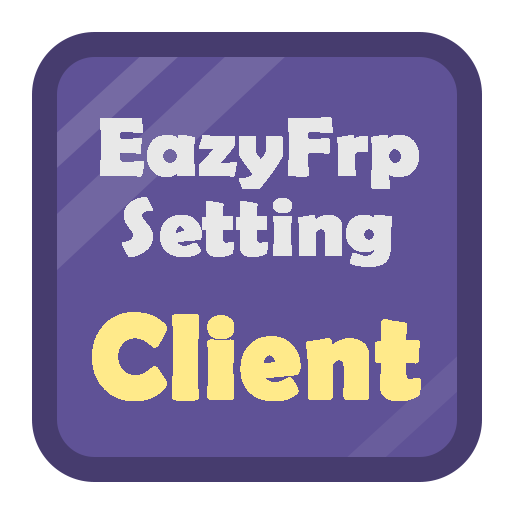
<style>
.page{position:relative;width:512px;height:512px;background:#5f5296}
.page>*{position:absolute;margin:0}
.t1{font:83.3px/80px "BerlinSansFBDemi-Bold";color:#e8e8e8;font-weight:bold}
.t2{font:120px "BerlinSansFBDemi-Bold";color:#ffea8a;font-weight:bold}
</style>
<div class="page">
<p class="t1" style="left:100px;top:117px;width:319px;height:150px;text-align:center">EazyFrp<br>Setting</p>
<p class="t2" style="left:92px;top:312px;width:329px;height:89px">Client</p>
</div>
